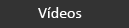
<style>
.page{position:relative;width:129px;height:28px;background:#333333}
.page>*{position:absolute;margin:0}
.t1{font:16px "Calibri";color:#ffffff}
</style>
<div class="page">
<p class="t1" style="left:38px;top:7px;width:44px;height:11px">Vídeos</p>
</div>
